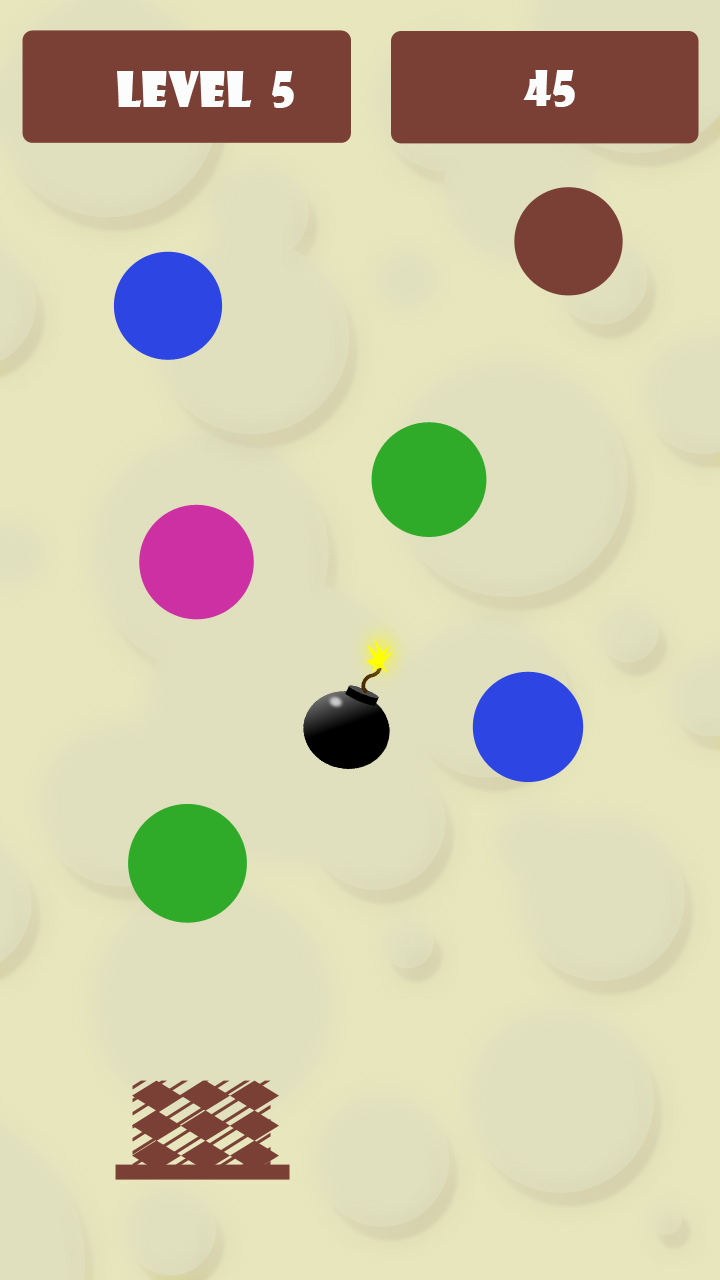
<style>
.page{position:relative;width:720px;height:1280px;background:#e0e0be}
.page>*{position:absolute;margin:0}
.t1{font:48px "ShowcardGothic-Reg";color:#fbfcfc}
</style>
<div class="page">
<p class="t1" style="left:117px;top:71px;width:177px;height:37px">LEVEL  5</p>
<p class="t1" style="left:523px;top:70px;width:52px;height:37px">45</p>
</div>
